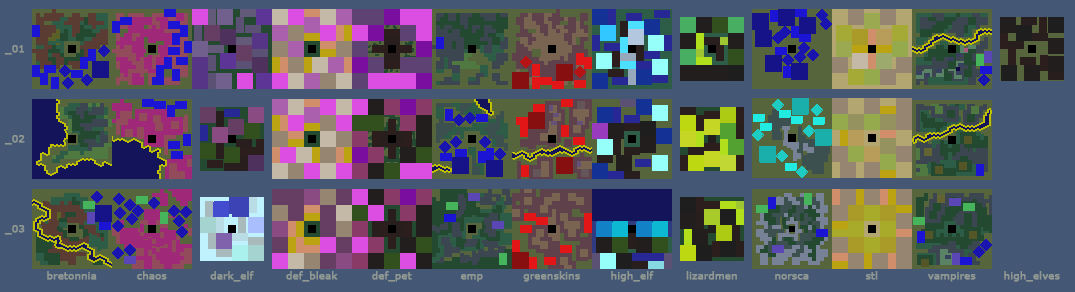
<style>
.page{position:relative;width:1075px;height:292px;background:#445774}
.page>*{position:absolute;margin:0}
.t1{font:10px "Verdana";color:#8f9892;font-weight:bold}
</style>
<div class="page">
<p class="t1" style="left:4px;top:45px;width:20px;height:10px">_01</p>
<p class="t1" style="left:4px;top:135px;width:21px;height:10px">_02</p>
<p class="t1" style="left:4px;top:225px;width:21px;height:10px">_03</p>
<p class="t1" style="left:47px;top:271px;width:50px;height:9px">bretonnia</p>
<p class="t1" style="left:137px;top:271px;width:30px;height:9px">chaos</p>
<p class="t1" style="left:210px;top:271px;width:44px;height:11px">dark_elf</p>
<p class="t1" style="left:286px;top:271px;width:52px;height:11px">def_bleak</p>
<p class="t1" style="left:372px;top:271px;width:40px;height:11px">def_pet</p>
<p class="t1" style="left:460px;top:274px;width:23px;height:8px">emp</p>
<p class="t1" style="left:523px;top:271px;width:57px;height:11px">greenskins</p>
<p class="t1" style="left:611px;top:271px;width:43px;height:11px">high_elf</p>
<p class="t1" style="left:686px;top:271px;width:51px;height:9px">lizardmen</p>
<p class="t1" style="left:775px;top:274px;width:34px;height:6px">norsca</p>
<p class="t1" style="left:865px;top:271px;width:13px;height:9px">stl</p>
<p class="t1" style="left:928px;top:272px;width:48px;height:10px">vampires</p>
<p class="t1" style="left:1004px;top:271px;width:56px;height:11px">high_elves</p>
</div>
